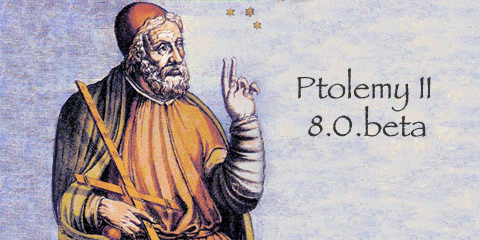
<style>
.page{position:relative;width:480px;height:240px}
.page>*{position:absolute;margin:0}
.t1{font:32px "Papyrus";color:#333333}
</style>
<div class="page">
<p class="t1" style="left:297px;top:68px;width:134px;height:69px;text-align:center">Ptolemy II<br> 8.0.beta</p>
</div>
